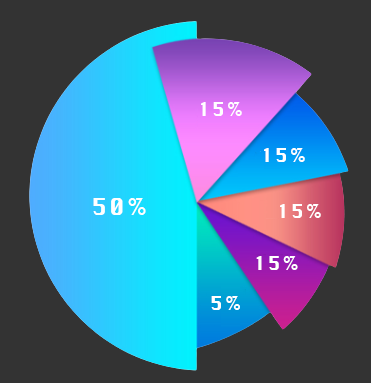
<style>
.page{position:relative;width:371px;height:383px;background:#333333}
.page>*{position:absolute;margin:0}
.t1{font:18.4px "Silom";letter-spacing:0.11em;color:#ffffff}
.t2{font:22.6px "Silom";letter-spacing:0.11em;color:#ffffff}
</style>
<div class="page">
<p class="t1" style="left:201px;top:102px;width:41px;height:14px">15%</p>
<p class="t1" style="left:264px;top:148px;width:41px;height:14px">15%</p>
<p class="t2" style="left:93px;top:198px;width:53px;height:17px">50%</p>
<p class="t1" style="left:280px;top:204px;width:41px;height:14px">15%</p>
<p class="t1" style="left:256px;top:256px;width:42px;height:14px">15%</p>
<p class="t1" style="left:211px;top:296px;width:29px;height:14px">5%</p>
</div>
